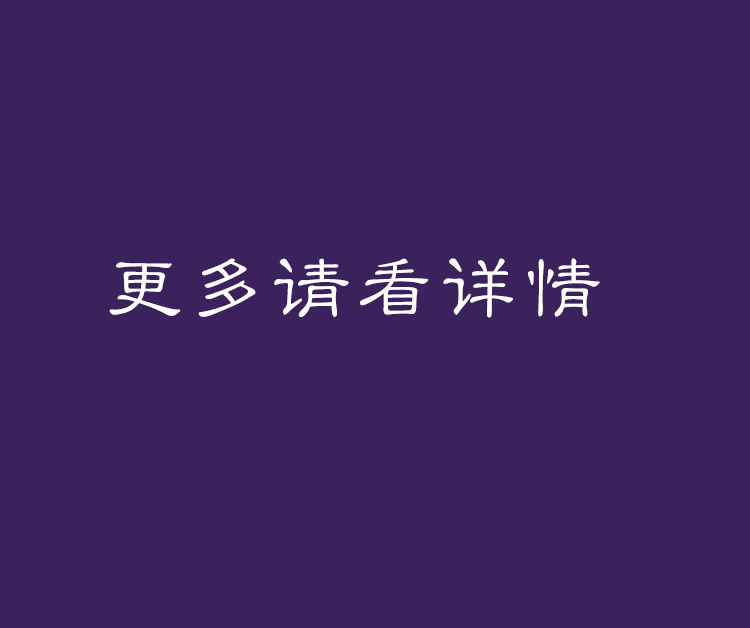
<style>
.page{position:relative;width:750px;height:628px;background:#3c225d}
.page>*{position:absolute;margin:0}
.t1{font:84px "STLibianTC-Regular";color:#ffffff}
</style>
<div class="page">
<p class="t1" style="left:109px;top:258px;width:491px;height:60px">更多请看详情</p>
</div>
